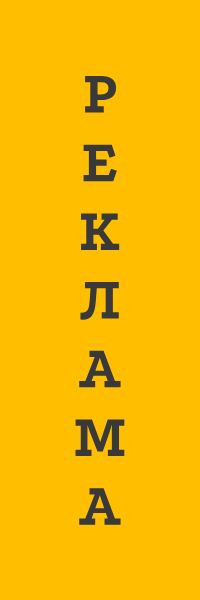
<style>
.page{position:relative;width:200px;height:600px;background:#ffbf00}
.page>*{position:absolute;margin:0}
.t1{font:62px "Podkova-Bold";color:#393939}
</style>
<div class="page">
<p class="t1" style="left:75px;top:75px;width:50px;height:450px;text-align:center">Р<br>Е<br>К<br>Л<br>А<br>М<br>А</p>
</div>
